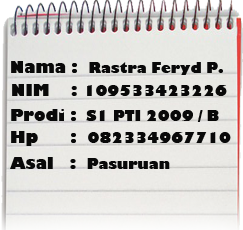
<style>
.page{position:relative;width:243px;height:230px}
.page>*{position:absolute;margin:0}
.t1{font:14px "GillSans-UltraBold";color:#090909}
.t2{font:16px "GillSans-UltraBold";color:#090909}
</style>
<div class="page">
<p class="t1" style="left:11px;top:61px;width:212px;height:14px"><span class="t2">Nama :  </span>Rastra Feryd P.</p>
<p class="t1" style="left:12px;top:84px;width:215px;height:12px"><span class="t2">NIM    : </span>109533423226</p>
<p class="t1" style="left:11px;top:109px;width:208px;height:13px"><span class="t2">Prodi :</span>  S1 PTI 2009 / B</p>
<p class="t1" style="left:11px;top:131px;width:220px;height:15px"><span class="t2">Hp      :  </span>082334967710</p>
<p class="t2" style="left:10px;top:157px;width:160px;height:12px">Asal   :  <span class="t1">Pasuruan</span></p>
</div>
